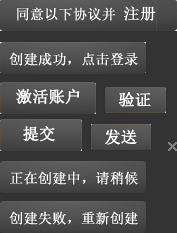
<style>
.page{position:relative;width:177px;height:233px;background:#333333}
.page>*{position:absolute;margin:0}
.t1{font:14px "SimSun";color:#ffffff;text-transform:uppercase;font-weight:bold}
.t2{font:16px "SimSun";color:#ffffff;text-transform:uppercase;font-weight:bold}
</style>
<div class="page">
<p class="t1" style="left:17px;top:6px;width:139px;height:15px">同意以下协议并 <span class="t2">注册</span></p>
<p class="t1" style="left:9px;top:52px;width:129px;height:14px">创建成功，点击登录</p>
<p class="t2" style="left:16px;top:88px;width:64px;height:17px">激活账户</p>
<p class="t2" style="left:118px;top:92px;width:33px;height:15px">验证</p>
<p class="t2" style="left:23px;top:126px;width:32px;height:16px">提交</p>
<p class="t2" style="left:105px;top:129px;width:32px;height:16px">发送</p>
<p class="t1" style="left:10px;top:171px;width:128px;height:14px">正在创建中，请稍候</p>
<p class="t1" style="left:9px;top:211px;width:129px;height:14px">创建失败，重新创建</p>
</div>
